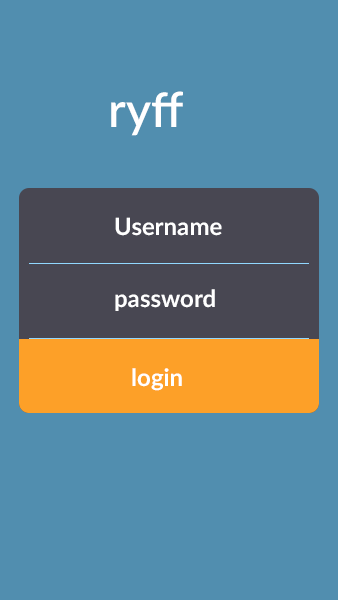
<style>
.page{position:relative;width:338px;height:600px;background:#518eaf}
.page>*{position:absolute;margin:0}
.t1{font:48px "Lato-Semibold";color:#ffffff}
.t2{font:24px "Lato-Bold";color:#ffffff}
</style>
<div class="page">
<p class="t1" style="left:111px;top:91px;width:72px;height:45px">ryff</p>
<p class="t2" style="left:115px;top:217px;width:107px;height:19px">Username</p>
<p class="t2" style="left:115px;top:289px;width:100px;height:22px">password</p>
<p class="t2" style="left:132px;top:368px;width:50px;height:23px">login</p>
</div>
